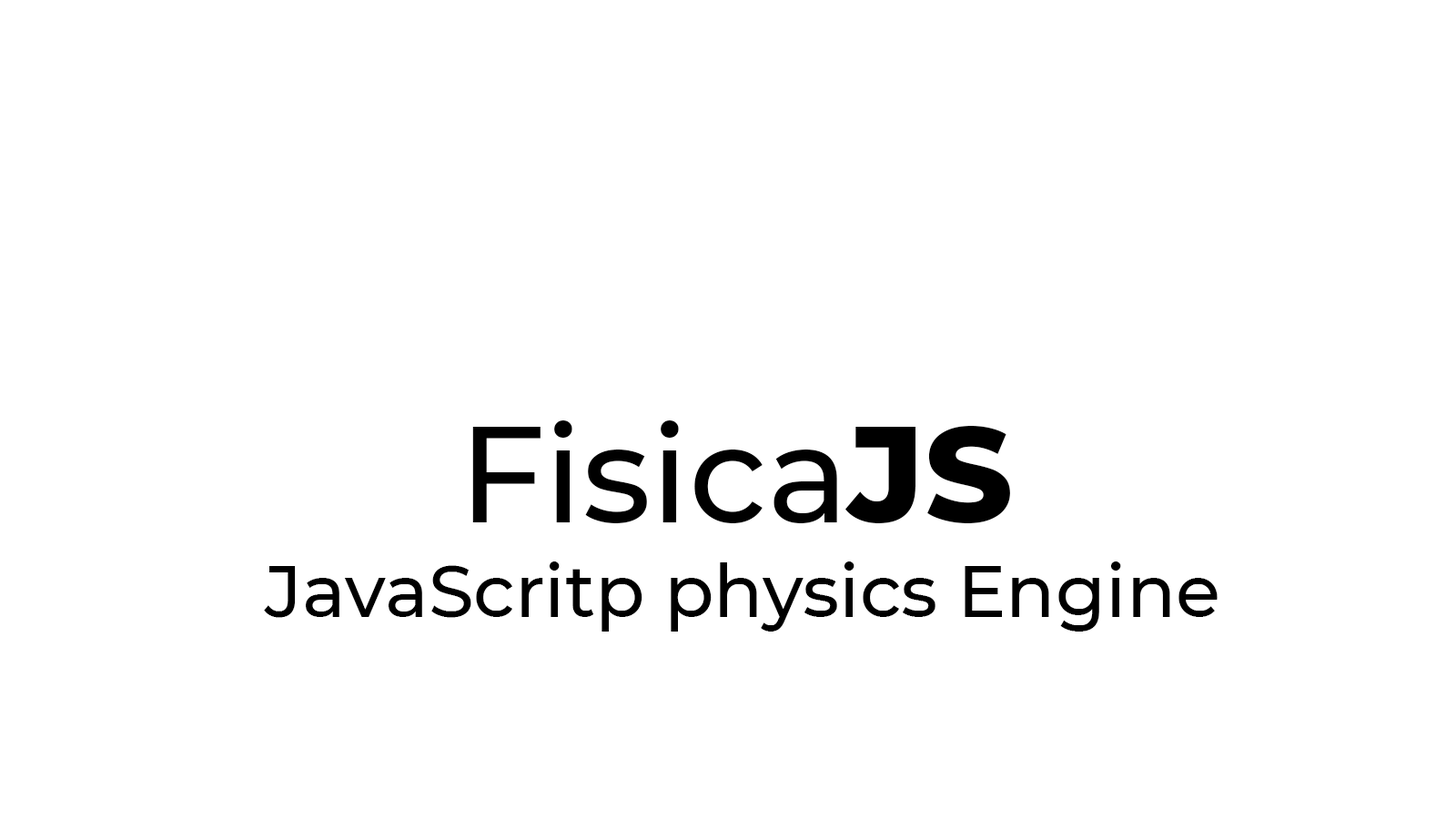
<style>
.page{position:relative;width:1456px;height:819px;background:#ffffff}
.page>*{position:absolute;margin:0}
.t1{font:136.5px "Montserrat-Medium";color:#000000}
.t2{font:136.5px "Montserrat-ExtraBold";color:#000000}
.t3{font:72.8px "Montserrat-Medium";color:#000000}
</style>
<div class="page">
<p class="t1" style="left:472px;top:420px;width:538px;height:103px">Fisica<span class="t2">JS</span></p>
<p class="t3" style="left:264px;top:561px;width:954px;height:71px">JavaScritp physics Engine</p>
</div>
